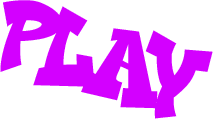
<style>
.page{position:relative;width:213px;height:119px;background:#ffffff}
.page>*{position:absolute;margin:0}
.t1{font:90px "FASTBLAZE";color:#d300ff}
</style>
<div class="page">
<p class="t1" style="left:0px;top:0px;width:213px;height:119px;rotate:16deg">play</p>
</div>
